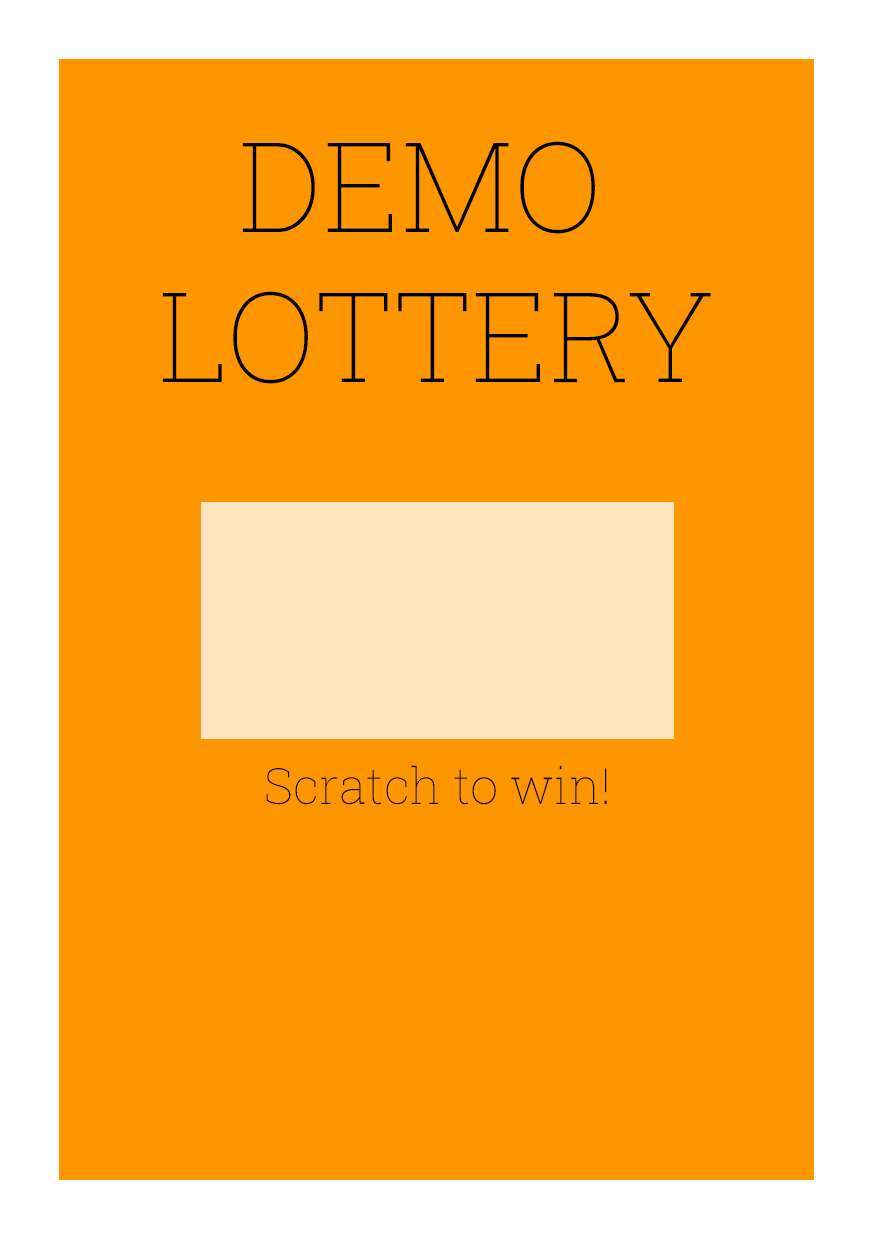
<style>
.page{position:relative;width:874px;height:1240px;background:#fe9601}
.page>*{position:absolute;margin:0}
.t1{font:125px "RobotoSlab-Thin";color:#000000}
.t2{font:50px "RobotoSlab-Thin";color:#000000}
</style>
<div class="page">
<p class="t1" style="left:162px;top:141px;width:549px;height:243px;text-align:center">DEMO <br>LOTTERY</p>
<p class="t2" style="left:266px;top:765px;width:341px;height:40px">Scratch to win!</p>
</div>
